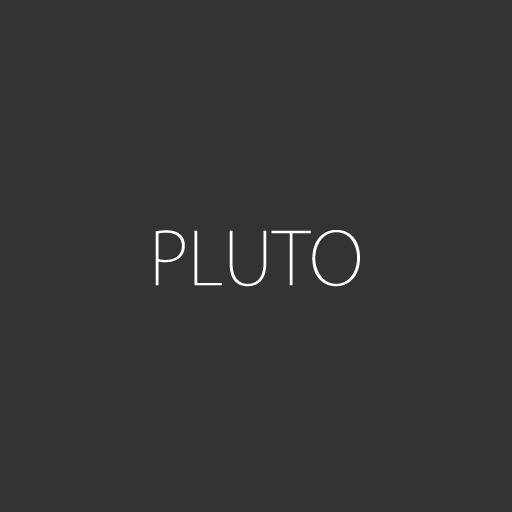
<style>
.page{position:relative;width:512px;height:512px;background:#333333}
.page>*{position:absolute;margin:0}
.t1{font:72px "KozGoPr6N-ExtraLight";color:#ffffff}
</style>
<div class="page">
<p class="t1" style="left:155px;top:230px;width:205px;height:57px">PLUTO</p>
</div>
